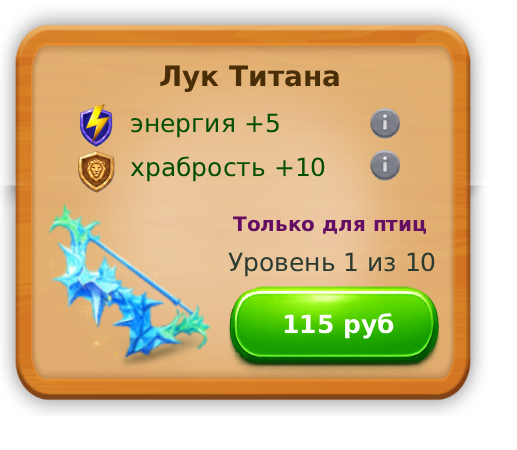
<style>
.page{position:relative;width:517px;height:450px}
.page>*{position:absolute;margin:0}
.t1{font:28px "DejaVuSans-Bold";color:#4a2e08}
.t2{font:25px "DejaVuSans";color:#044f03}
.t3{font:20px "DejaVuSans-Bold";color:#640d63}
.t4{font:25px "DejaVuSans";color:#2b3a30}
.t5{font:25px "DejaVuSans-Bold";color:#fdfffd}
</style>
<div class="page">
<p class="t1" style="left:160px;top:65px;width:179px;height:28px">Лук Титана</p>
<p class="t2" style="left:131px;top:113px;width:148px;height:25px">энергия +5</p>
<p class="t2" style="left:130px;top:156px;width:195px;height:26px">храбрость +10</p>
<p class="t3" style="left:233px;top:216px;width:193px;height:18px">Только для птиц</p>
<p class="t4" style="left:228px;top:252px;width:207px;height:25px">Уровень 1 из 10</p>
<p class="t5" style="left:284px;top:313px;width:110px;height:26px">115 руб</p>
</div>
